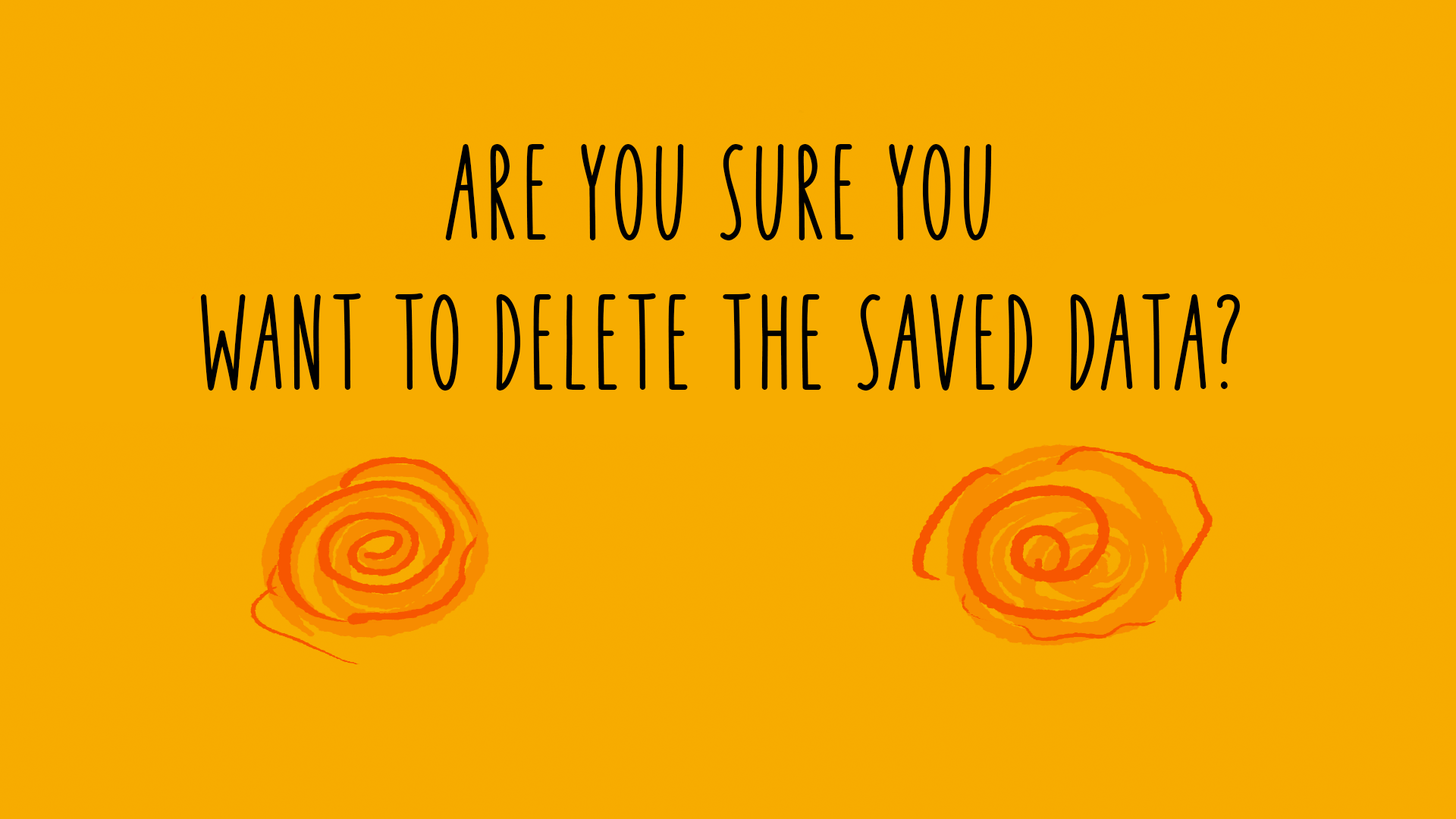
<style>
.page{position:relative;width:1456px;height:819px;background:#f7ac00}
.page>*{position:absolute;margin:0}
.t1{font:125px "KEYLIMEDemo-Regular";letter-spacing:0.04em;color:#000000;font-variant:small-caps}
</style>
<div class="page">
<p class="t1" style="left:200px;top:144px;width:1040px;height:247px;text-align:center">ARE YOU SURE YOU<br>WANT TO DELETE THE SAVED DATA?</p>
</div>
